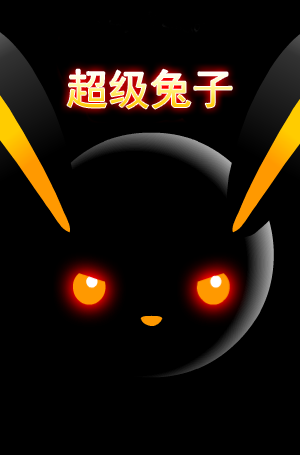
<style>
.page{position:relative;width:300px;height:455px;background:#000000}
.page>*{position:absolute;margin:0}
.t1{font:42px "SimHei"}
</style>
<div class="page">
<p class="t1" style="left:67px;top:69px;width:165px;height:40px">超级兔子</p>
</div>
